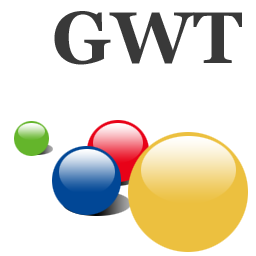
<style>
.page{position:relative;width:256px;height:256px;background:#ffffff}
.page>*{position:absolute;margin:0}
.t1{font:72.7px "Georgia-Bold";color:#393939;font-variant:small-caps}
</style>
<div class="page">
<p class="t1" style="left:54px;top:11px;width:188px;height:54px">GWT</p>
</div>
